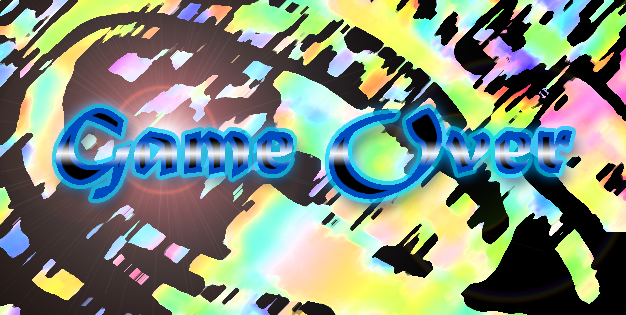
<style>
.page{position:relative;width:626px;height:315px}
.page>*{position:absolute;margin:0}
.t1{font:100px "MaturaMTScriptCapitals"}
</style>
<div class="page">
<p class="t1" style="left:56px;top:108px;width:516px;height:91px">Game Over</p>
</div>
